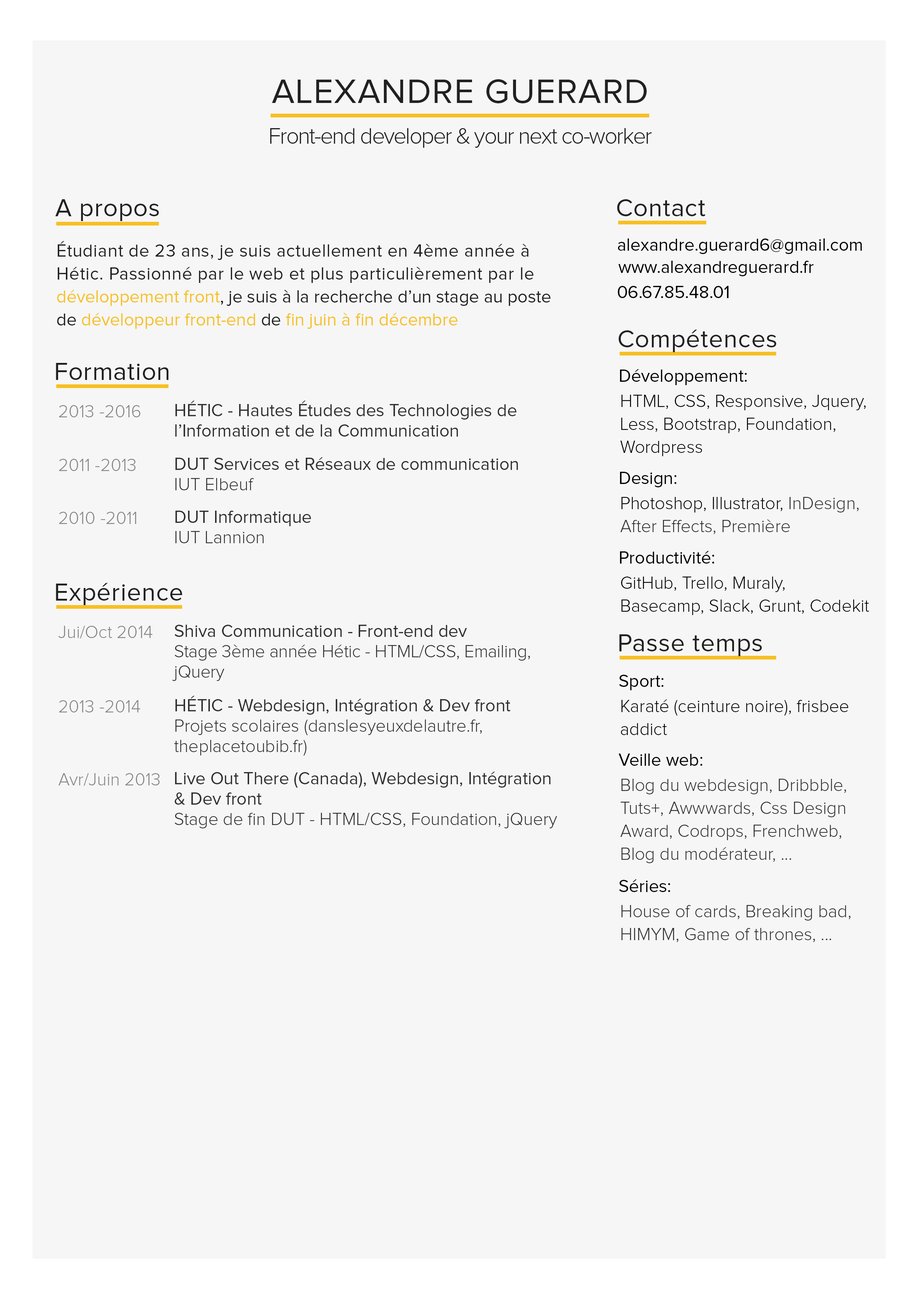
<style>
.page{position:relative;width:918px;height:1299px;background:#f6f6f6}
.page>*{position:absolute;margin:0}
.t1{font:34.8px "ProximaNova-Regular";letter-spacing:0.025em;color:#212121}
.t2{font:23px "ProximaNova-Light";letter-spacing:-0.05em;color:#212121}
.t3{font:25.2px "ProximaNova-Regular";letter-spacing:0.025em;color:#212121}
.t4{font:17.8px/23px "ProximaNova-Regular";letter-spacing:0.025em;color:#212121}
.t5{font:17.8px/23px "ProximaNova-Regular";color:#f7c023}
.t6{font:17.8px/23px "ProximaNova-Regular";color:#101010}
.t7{font:17.8px/23px "ProximaNova-Regular";color:#212121}
.t8{font:17.8px "ProximaNova-Regular";color:#000000}
.t9{font:17.8px/20.4px "ProximaNova-Regular";color:#303030}
.t10{font:17.8px/23px "ProximaNova-Light";color:#000000}
.t11{font:17.8px "ProximaNova-Light";color:#848586}
.t12{font:17.8px/20.4px "ProximaNova-Light";color:#303030}
.t13{font:17.8px/23px "ProximaNova-Light";color:#303030}
.t14{font:17.8px/20.4px "ProximaNova-Light";letter-spacing:-0.01em;color:#303030}
</style>
<div class="page">
<p class="t1" style="left:272px;top:79px;width:375px;height:24px">ALEXANDRE GUERARD</p>
<p class="t2" style="left:270px;top:128px;width:382px;height:20px">Front-end developer &amp; your next co-worker</p>
<p class="t3" style="left:55px;top:199px;width:104px;height:22px">A propos</p>
<p class="t3" style="left:617px;top:199px;width:89px;height:17px">Contact</p>
<p class="t4" style="left:57px;top:241px;width:494px;height:88px">Étudiant de 23 ans, je suis actuellement en 4ème année à Hétic. Passionné par le web et plus particulièrement par le <span class="t5">développement front</span><span class="t6">, </span><span class="t7">je suis à la recherche d’un stage au poste de </span><span class="t5">développeur front-end </span><span class="t7">de </span><span class="t5">fin juin à fin décembre</span></p>
<p class="t8" style="left:618px;top:238px;width:244px;height:16px">alexandre.guerard6@gmail.com</p>
<p class="t8" style="left:618px;top:261px;width:196px;height:15px">www.alexandreguerard.fr</p>
<p class="t8" style="left:618px;top:286px;width:111px;height:12px">06.67.85.48.01</p>
<p class="t3" style="left:619px;top:329px;width:157px;height:23px">Compétences</p>
<p class="t3" style="left:56px;top:363px;width:112px;height:17px">Formation</p>
<p class="t8" style="left:620px;top:369px;width:127px;height:16px">Développement:</p>
<p class="t9" style="left:175px;top:401px;width:341px;height:35px">HÉTIC - Hautes Études des Technologies de l’Information et de la Communication</p>
<p class="t10" style="left:620px;top:395px;width:246px;height:61px">HTML, CSS, Responsive, Jquery, Less, Bootstrap, Foundation, Wordpress</p>
<p class="t11" style="left:59px;top:405px;width:81px;height:12px">2013 -2016</p>
<p class="t11" style="left:59px;top:459px;width:77px;height:12px">2011 -2013</p>
<p class="t9" style="left:175px;top:457px;width:343px;height:33px">DUT Services et Réseaux de communication<br><span class="t12">IUT Elbeuf</span></p>
<p class="t8" style="left:620px;top:472px;width:57px;height:15px">Design:</p>
<p class="t13" style="left:620px;top:497px;width:239px;height:37px"><span class="t10">Photoshop, Illustrator, </span>InDesign, After Effects, Première</p>
<p class="t11" style="left:59px;top:512px;width:77px;height:12px">2010 -2011</p>
<p class="t9" style="left:175px;top:511px;width:136px;height:32px">DUT Informatique<br><span class="t12">IUT Lannion</span></p>
<p class="t8" style="left:620px;top:551px;width:95px;height:12px">Productivité:</p>
<p class="t10" style="left:621px;top:576px;width:248px;height:39px">GitHub, Trello, Muraly, Basecamp, Slack, Grunt, Codekit</p>
<p class="t3" style="left:56px;top:583px;width:126px;height:22px">Expérience</p>
<p class="t11" style="left:58px;top:626px;width:95px;height:12px">Jui/Oct 2014</p>
<p class="t14" style="left:172px;top:625px;width:358px;height:56px"><span class="t9">Shiva Communication - Front-end dev<br></span>Stage 3ème année Hétic - HTML/CSS, Emailing, jQuery</p>
<p class="t3" style="left:619px;top:634px;width:143px;height:22px">Passe temps</p>
<p class="t8" style="left:619px;top:675px;width:45px;height:15px">Sport:</p>
<p class="t11" style="left:59px;top:700px;width:81px;height:12px">2013 -2014</p>
<p class="t12" style="left:174px;top:696px;width:337px;height:60px"><span class="t9">HÉTIC - Webdesign, Intégration &amp; Dev front<br></span>Projets scolaires (danslesyeuxdelautre.fr, theplacetoubib.fr)</p>
<p class="t10" style="left:621px;top:699px;width:228px;height:36px">Karaté (ceinture noire), frisbee addict</p>
<p class="t8" style="left:619px;top:753px;width:84px;height:13px">Veille web:</p>
<p class="t11" style="left:58px;top:773px;width:102px;height:13px">Avr/Juin 2013</p>
<p class="t9" style="left:175px;top:772px;width:382px;height:56px">Live Out There (Canada), Webdesign, Intégration &amp; Dev front<br><span class="t12">Stage de fin DUT - HTML/CSS, Foundation, jQuery</span></p>
<p class="t13" style="left:620px;top:779px;width:226px;height:84px">Blog du webdesign, Dribbble, Tuts+, Awwwards, Css Design Award, Codrops, Frenchweb, Blog du modérateur, ...</p>
<p class="t8" style="left:619px;top:879px;width:51px;height:13px">Séries:</p>
<p class="t13" style="left:622px;top:905px;width:229px;height:37px">House of cards, Breaking bad, HIMYM, Game of thrones, ...</p>
</div>
